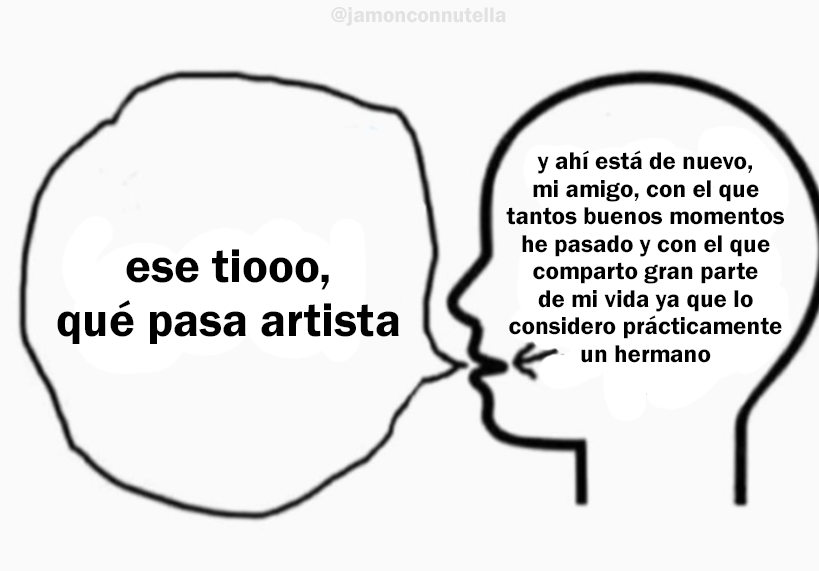
<style>
.page{position:relative;width:819px;height:571px;background:#fafafa}
.page>*{position:absolute;margin:0}
.t1{font:21.6px "FranklinGothic-Demi";color:#e2e2e2}
.t2{font:25px "FranklinGothic-Demi";color:#000000}
.t3{font:48.4px "FranklinGothic-Demi";color:#000000}
</style>
<div class="page">
<p class="t1" style="left:331px;top:7px;width:175px;height:19px">@jamonconnutella</p>
<p class="t2" style="left:506px;top:150px;width:278px;height:213px;text-align:center">y ahí está de nuevo,<br>mi amigo, con el que<br>tantos buenos momentos<br>he pasado y con el que<br>comparto gran parte<br>de mi vida ya que lo<br>considero prácticamente<br>un hermano</p>
<p class="t3" style="left:57px;top:249px;width:342px;height:95px;text-align:center">ese tiooo,<br>qué pasa artista</p>
</div>
